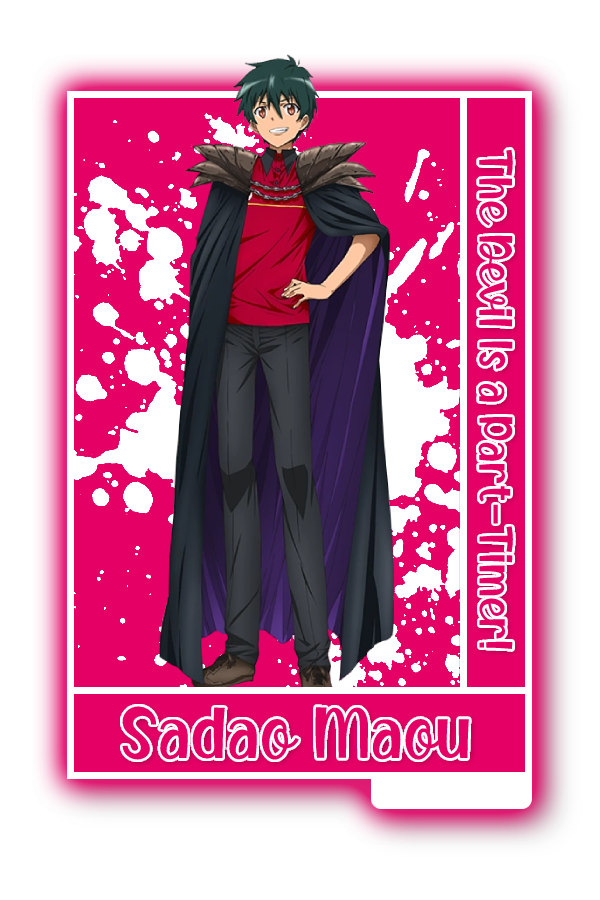
<style>
.page{position:relative;width:600px;height:900px;background:#ffffff}
.page>*{position:absolute;margin:0}
.t1{font:48.8px "ButterFood";color:#e50065}
.t2{font:75px "ButterFood";color:#e50065}
</style>
<div class="page">
<p class="t1" style="left:478px;top:149px;width:37px;height:500px;rotate:90deg">The Devil Is a Part-Timer!</p>
<p class="t2" style="left:121px;top:706px;width:348px;height:55px">Sadao Maou</p>
</div>
